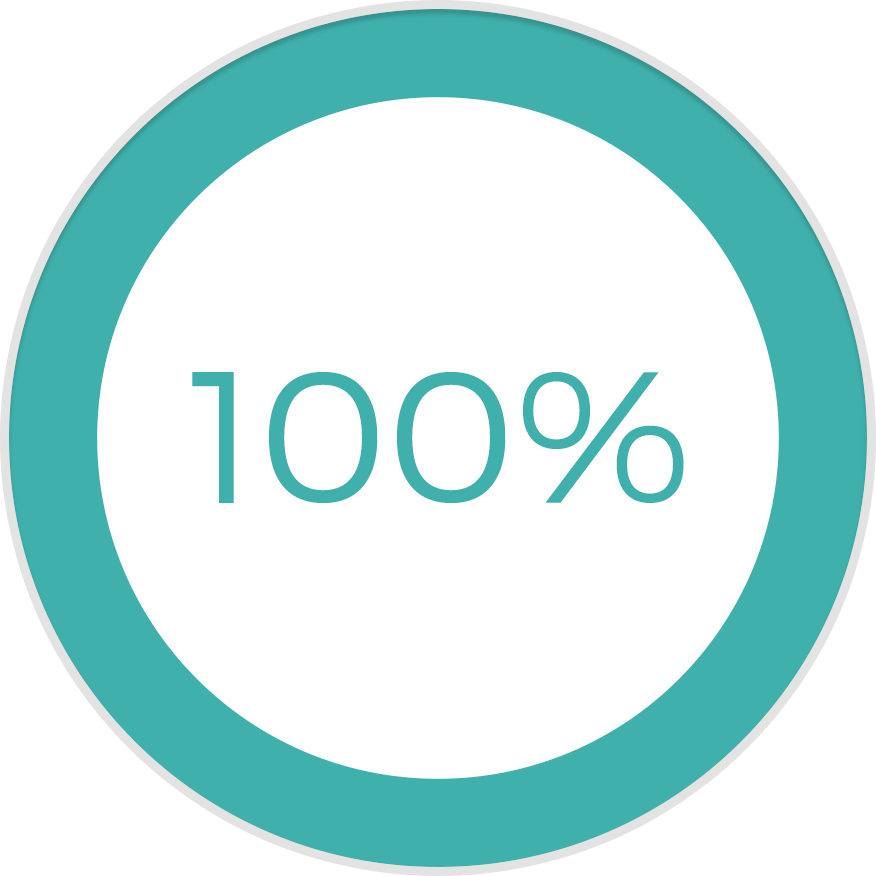
<style>
.page{position:relative;width:876px;height:876px;background:#ffffff}
.page>*{position:absolute;margin:0}
.t1{font:187.4px "Montserrat-Light";color:#3fb0ac}
</style>
<div class="page">
<p class="t1" style="left:192px;top:372px;width:492px;height:131px">100%</p>
</div>
